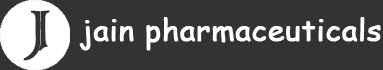
<style>
.page{position:relative;width:383px;height:70px;background:#333333}
.page>*{position:absolute;margin:0}
.t1{font:67.8px "ColonnaMT";color:#333333;font-weight:bold}
.t2{font:30px "ComicSansMS";color:#ffffff;font-weight:bold}
</style>
<div class="page">
<p class="t1" style="left:23px;top:10px;width:27px;height:51px;rotate:-1deg">J</p>
<p class="t2" style="left:79px;top:17px;width:302px;height:34px">jain pharmaceuticals</p>
</div>
